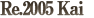
<style>
.page{position:relative;width:94px;height:18px;background:#ffffff}
.page>*{position:absolute;margin:0}
.t1{font:18px "RyuminPro-ExBold";letter-spacing:-0.08em;color:#4a3f32;font-weight:bold;scale:0.9 1}
</style>
<div class="page">
<p class="t1" style="left:0px;top:1px;width:84px;height:15px">Re.2005 Kai</p>
</div>
